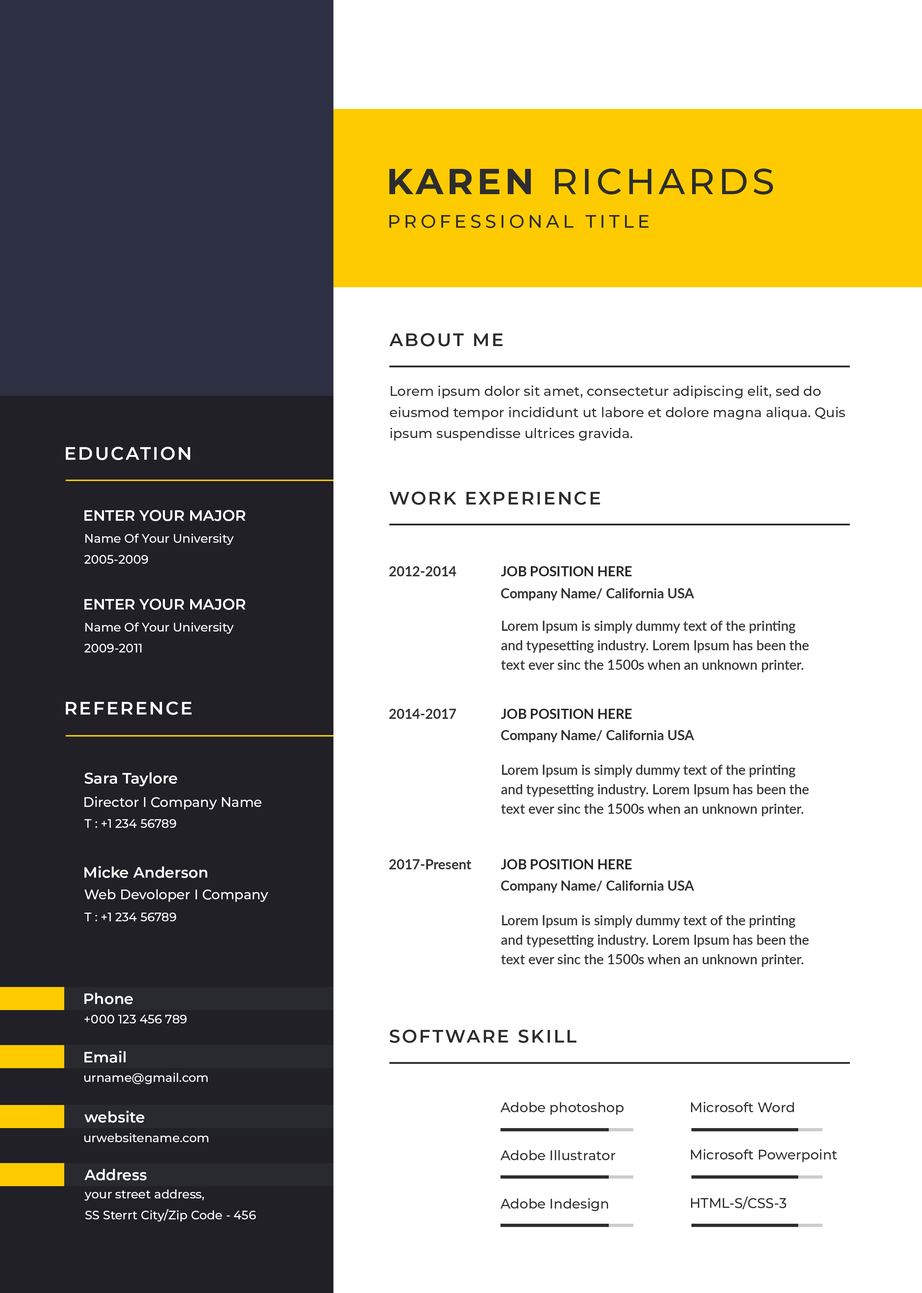
<style>
.page{position:relative;width:922px;height:1293px;background:#ffffff}
.page>*{position:absolute;margin:0}
.t1{font:36.1px "Montserrat-Medium";letter-spacing:0.1em;color:#2d2d2d;text-transform:uppercase}
.t2{font:36.1px "Montserrat-Bold";letter-spacing:0.1em;color:#2d2d2d;text-transform:uppercase}
.t3{font:18px "Montserrat-Medium";letter-spacing:0.2em;color:#2d2d2d;text-transform:uppercase}
.t4{font:18px "Montserrat-SemiBold";letter-spacing:0.1em;color:#2d2d2d;text-transform:uppercase}
.t5{font:13.5px/21.1px "Montserrat-Medium";color:#2d2d2d}
.t6{font:18px "Montserrat-SemiBold";letter-spacing:0.1em;color:#ffffff;text-transform:uppercase}
.t7{font:15px "Montserrat-SemiBold";color:#ffffff;text-transform:uppercase}
.t8{font:12px/21.1px "Montserrat-Medium";color:#ffffff}
.t9{font:13.5px "Lato-Bold";color:#353535}
.t10{font:13.5px "Lato-Bold";color:#282828;text-transform:uppercase}
.t11{font:13.5px/19.5px "Lato-Semibold";color:#353535}
.t12{font:15px "Montserrat-SemiBold";color:#ffffff}
.t13{font:13.5px "Montserrat-Medium";color:#ffffff}
.t14{font:12px "Montserrat-Medium";color:#ffffff}
.t15{font:13.5px "Montserrat-Medium";color:#2d2d2d}
</style>
<div class="page">
<p class="t1" style="left:389px;top:169px;width:384px;height:26px"><span class="t2">karen </span>Richards</p>
<p class="t3" style="left:389px;top:215px;width:260px;height:13px">professional title</p>
<p class="t4" style="left:389px;top:333px;width:114px;height:13px">about me</p>
<p class="t5" style="left:390px;top:385px;width:455px;height:56px">Lorem ipsum dolor sit amet, consectetur adipiscing elit, sed do eiusmod tempor incididunt ut labore et dolore magna aliqua. Quis ipsum suspendisse ultrices gravida.</p>
<p class="t6" style="left:66px;top:447px;width:124px;height:13px">education</p>
<p class="t4" style="left:389px;top:492px;width:211px;height:13px">work experience</p>
<p class="t7" style="left:84px;top:510px;width:161px;height:11px">Enter your major</p>
<p class="t8" style="left:84px;top:533px;width:150px;height:31px">Name Of Your University<br>2005-2009</p>
<p class="t9" style="left:389px;top:566px;width:68px;height:10px">2012-2014</p>
<p class="t10" style="left:501px;top:566px;width:131px;height:10px">job position here</p>
<p class="t9" style="left:501px;top:588px;width:193px;height:13px">Company Name/ California USA</p>
<p class="t7" style="left:84px;top:599px;width:161px;height:11px">Enter your major</p>
<p class="t8" style="left:84px;top:622px;width:150px;height:31px">Name Of Your University<br>2009-2011</p>
<p class="t11" style="left:501px;top:621px;width:308px;height:51px">Lorem Ipsum is simply dummy text of the printing and typesetting industry. Lorem Ipsum has been the text ever sinc the 1500s when an unknown printer.</p>
<p class="t6" style="left:66px;top:702px;width:126px;height:13px">reference</p>
<p class="t9" style="left:389px;top:709px;width:67px;height:10px">2014-2017</p>
<p class="t10" style="left:501px;top:709px;width:131px;height:10px">job position here</p>
<p class="t9" style="left:501px;top:730px;width:193px;height:12px">Company Name/ California USA</p>
<p class="t12" style="left:84px;top:772px;width:93px;height:14px">Sara Taylore</p>
<p class="t11" style="left:501px;top:765px;width:308px;height:51px">Lorem Ipsum is simply dummy text of the printing and typesetting industry. Lorem Ipsum has been the text ever sinc the 1500s when an unknown printer.</p>
<p class="t13" style="left:84px;top:797px;width:178px;height:13px">Director I Company Name</p>
<p class="t14" style="left:84px;top:819px;width:92px;height:9px">T : +1 234 56789</p>
<p class="t12" style="left:84px;top:866px;width:124px;height:12px">Micke Anderson</p>
<p class="t9" style="left:389px;top:859px;width:82px;height:10px">2017-Present</p>
<p class="t10" style="left:501px;top:859px;width:131px;height:10px">job position here</p>
<p class="t9" style="left:501px;top:881px;width:193px;height:12px">Company Name/ California USA</p>
<p class="t13" style="left:84px;top:889px;width:184px;height:13px">Web Devoloper I Company</p>
<p class="t14" style="left:84px;top:913px;width:92px;height:8px">T : +1 234 56789</p>
<p class="t11" style="left:501px;top:915px;width:308px;height:52px">Lorem Ipsum is simply dummy text of the printing and typesetting industry. Lorem Ipsum has been the text ever sinc the 1500s when an unknown printer.</p>
<p class="t12" style="left:84px;top:993px;width:49px;height:11px">Phone</p>
<p class="t14" style="left:84px;top:1015px;width:103px;height:9px">+000 123 456 789</p>
<p class="t4" style="left:389px;top:1030px;width:188px;height:13px">software skill</p>
<p class="t12" style="left:84px;top:1051px;width:42px;height:12px">Email</p>
<p class="t14" style="left:84px;top:1073px;width:124px;height:11px">urname@gmail.com</p>
<p class="t15" style="left:501px;top:1102px;width:123px;height:13px">Adobe photoshop</p>
<p class="t15" style="left:691px;top:1102px;width:103px;height:10px">Microsoft Word</p>
<p class="t12" style="left:84px;top:1111px;width:60px;height:12px">website</p>
<p class="t14" style="left:84px;top:1133px;width:125px;height:9px">urwebsitename.com</p>
<p class="t15" style="left:501px;top:1150px;width:114px;height:10px">Adobe Illustrator</p>
<p class="t15" style="left:691px;top:1149px;width:146px;height:13px">Microsoft Powerpoint</p>
<p class="t12" style="left:84px;top:1169px;width:63px;height:12px">Address</p>
<p class="t8" style="left:84px;top:1190px;width:172px;height:32px">your street address,<br>SS Sterrt City/Zip Code - 456</p>
<p class="t15" style="left:501px;top:1198px;width:107px;height:13px">Adobe Indesign</p>
<p class="t15" style="left:691px;top:1196px;width:95px;height:13px">HTML-S/CSS-3</p>
</div>
